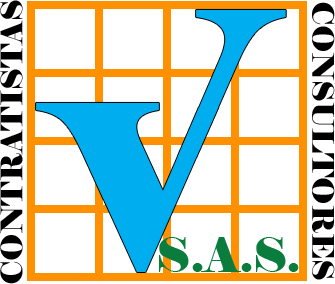
<style>
.page{position:relative;width:335px;height:284px;background:#ffffff}
.page>*{position:absolute;margin:0}
.t1{font:30px "Elephant-Regular";color:#000000;text-transform:uppercase}
.t2{font:29.9px "Elephant-Regular";color:#000000;text-transform:uppercase}
.t3{font:48px "Elephant-Regular";color:#0a7c3d;text-transform:uppercase}
</style>
<div class="page">
<p class="t1" style="left:0px;top:0px;width:23px;height:284px;rotate:-90deg">contratistas</p>
<p class="t2" style="left:312px;top:2px;width:23px;height:278px;rotate:90deg">CONSULTORES</p>
<p class="t3" style="left:159px;top:237px;width:140px;height:35px">s.a.s.</p>
</div>
